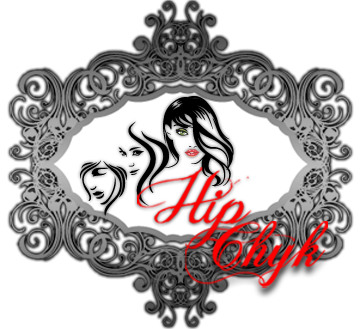
<style>
.page{position:relative;width:360px;height:329px;background:#ffffff}
.page>*{position:absolute;margin:0}
.t1{font:63.8px "JellykaDeliciousCake";color:#ff0000}
.t2{font:69.6px "ChopinScript";color:#ff0000}
</style>
<div class="page">
<p class="t1" style="left:137px;top:167px;width:158px;height:82px">Hip</p>
<p class="t2" style="left:185px;top:221px;width:143px;height:67px">Chyk</p>
</div>
